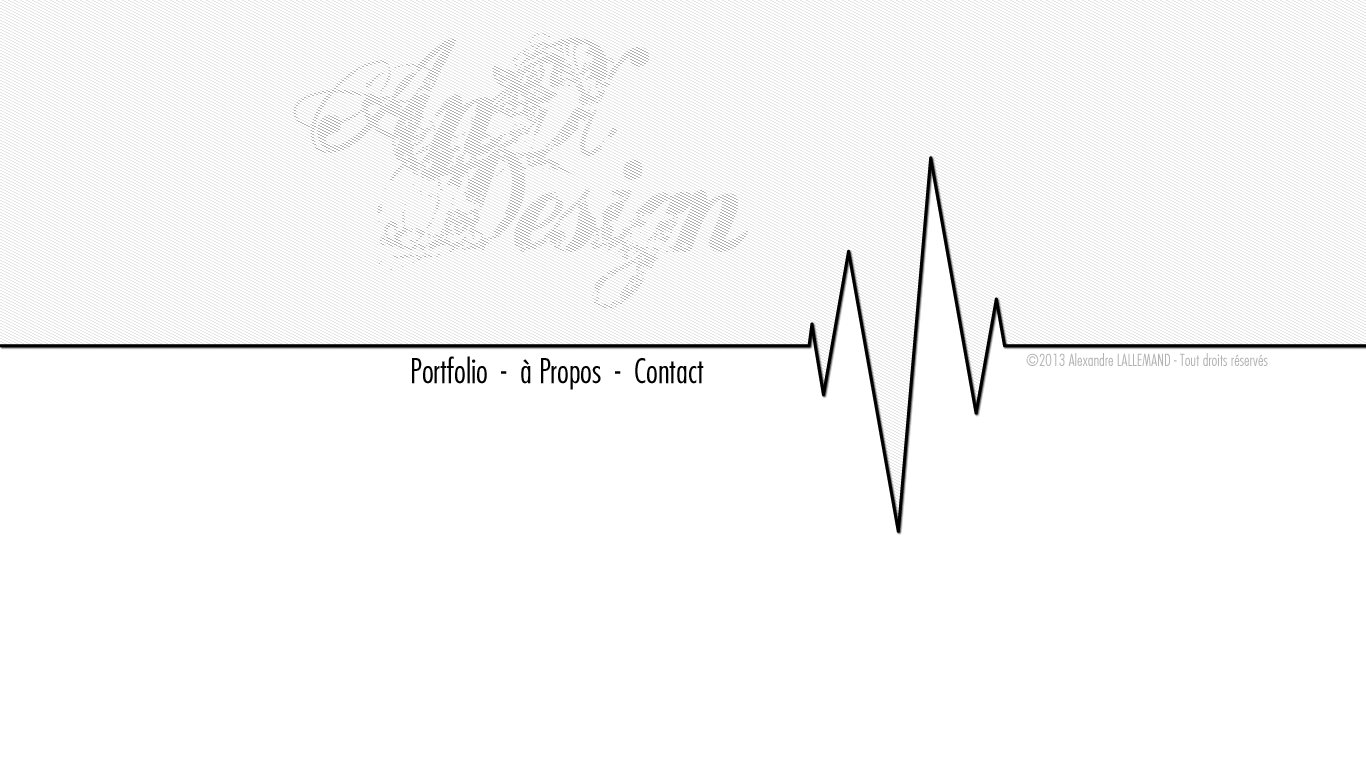
<style>
.page{position:relative;width:1366px;height:768px;background:#ffffff}
.page>*{position:absolute;margin:0}
.t1{font:16px "FuturaLight";color:#b3b3b3}
.t2{font:33px "FuturaLight";color:#000000}
</style>
<div class="page">
<p class="t1" style="left:1026px;top:353px;width:242px;height:13px">©2013 Alexandre LALLEMAND - Tout droits réservés</p>
<p class="t2" style="left:412px;top:356px;width:292px;height:34px">Portfolio  -  à Propos  -  Contact</p>
</div>
